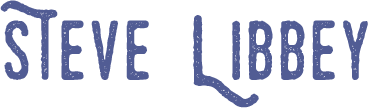
<style>
.page{position:relative;width:368px;height:108px;background:#ffffff}
.page>*{position:absolute;margin:0}
.t1{font:81.8px "SwistblnkMonthoers";letter-spacing:0.025em;color:#515c94}
.t2{font:98.1px "SwistblnkMonthoers";letter-spacing:0.025em;color:#515c94}
</style>
<div class="page">
<p class="t1" style="left:0px;top:0px;width:368px;height:108px">sTeve <span class="t2">L</span>ibbey</p>
</div>
